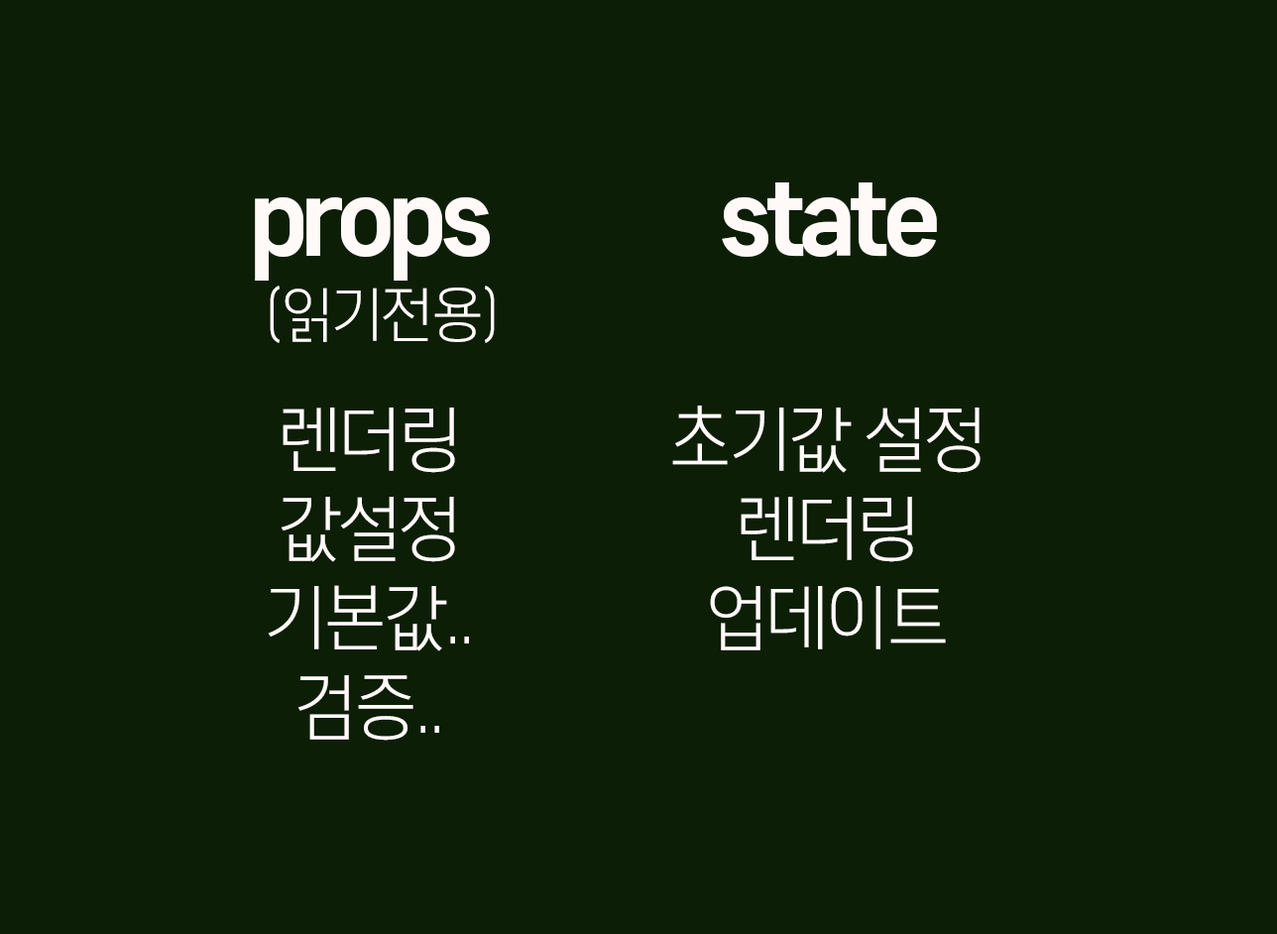
<style>
.page{position:relative;width:1277px;height:934px;background:#0d1e06}
.page>*{position:absolute;margin:0}
.t1{font:103.4px "CoreGothicD-7ExtraBold";letter-spacing:-0.075em;color:#fffaf8}
.t2{font:59.5px/81.3px "CoreGothicD-3Light";letter-spacing:-0.075em;color:#fffaf8}
.t3{font:103.4px/129.2px "CoreGothicD-7ExtraBold";letter-spacing:-0.075em;color:#fffaf8}
.t4{font:71.4px/89.2px "CoreGothicD-3Light";letter-spacing:-0.075em;color:#fffaf8}
</style>
<div class="page">
<p class="t1" style="left:722px;top:182px;width:215px;height:76px">state</p>
<p class="t2" style="left:255px;top:196px;width:240px;height:147px;text-align:center"><span class="t3">props <br></span>(읽기전용)</p>
<p class="t4" style="left:268px;top:407px;width:201px;height:334px;text-align:center">렌더링<br>값설정<br>기본값..<br>검증..</p>
<p class="t4" style="left:672px;top:405px;width:308px;height:245px;text-align:center">초기값 설정<br>렌더링<br>업데이트</p>
</div>
